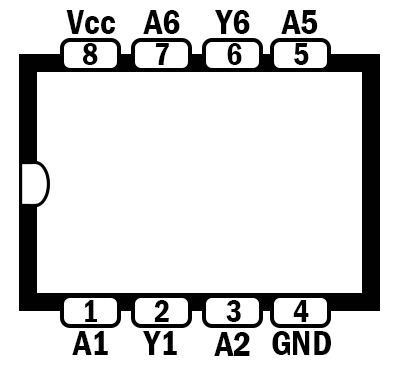
<style>
.page{position:relative;width:402px;height:372px;background:#ffffff}
.page>*{position:absolute;margin:0}
.t1{font:36px "FranklinGothic-DemiCond";color:#000000}
.t2{font:32px "FranklinGothic-DemiCond";color:#000000}
</style>
<div class="page">
<p class="t1" style="left:66px;top:10px;width:50px;height:24px">Vcc</p>
<p class="t1" style="left:143px;top:10px;width:37px;height:24px">A6</p>
<p class="t1" style="left:215px;top:10px;width:35px;height:24px">Y6</p>
<p class="t1" style="left:281px;top:10px;width:37px;height:24px">A5</p>
<p class="t2" style="left:82px;top:43px;width:16px;height:22px">8</p>
<p class="t2" style="left:155px;top:43px;width:14px;height:22px">7</p>
<p class="t2" style="left:227px;top:43px;width:15px;height:22px">6</p>
<p class="t2" style="left:294px;top:43px;width:15px;height:22px">5</p>
<p class="t2" style="left:85px;top:300px;width:12px;height:22px">1</p>
<p class="t2" style="left:154px;top:300px;width:15px;height:22px">2</p>
<p class="t2" style="left:226px;top:300px;width:15px;height:22px">3</p>
<p class="t2" style="left:293px;top:300px;width:16px;height:22px">4</p>
<p class="t1" style="left:72px;top:331px;width:36px;height:24px">A1</p>
<p class="t1" style="left:143px;top:331px;width:34px;height:24px">Y1</p>
<p class="t1" style="left:214px;top:332px;width:36px;height:24px">A2</p>
<p class="t1" style="left:272px;top:331px;width:59px;height:24px">GND</p>
</div>
